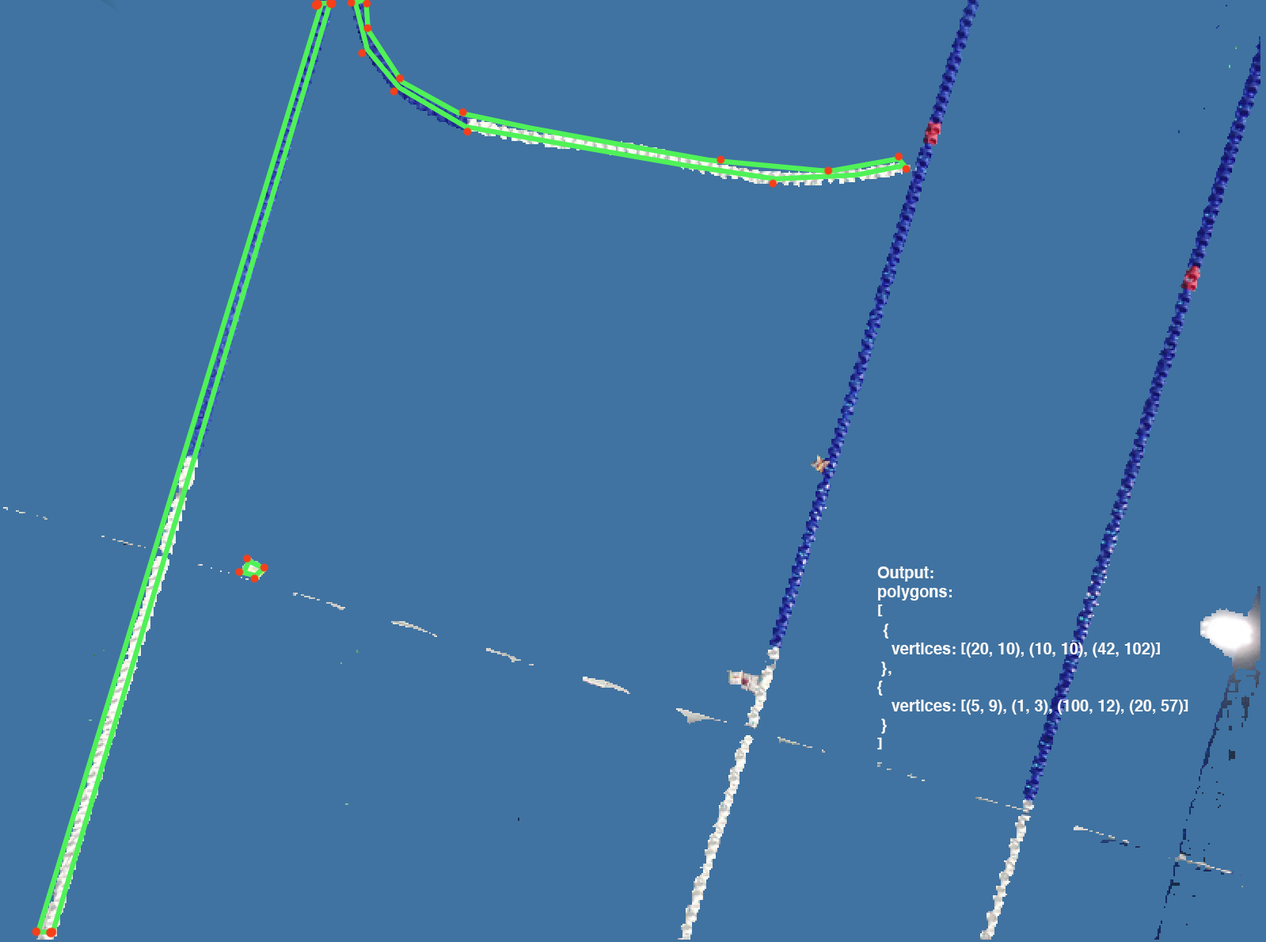
<style>
.page{position:relative;width:1266px;height:942px;background:#4073a1}
.page>*{position:absolute;margin:0}
.t1{font:15.8px "Helvetica-Bold";color:#f7f7f7}
</style>
<div class="page">
<p class="t1" style="left:877px;top:566px;width:312px;height:183px">Output:<br>polygons:<br>[<br> {<br>  vertices: [(20, 10), (10, 10), (42, 102)]<br> },<br>{<br>  vertices: [(5, 9), (1, 3), (100, 12), (20, 57)]<br> }<br>]</p>
</div>
